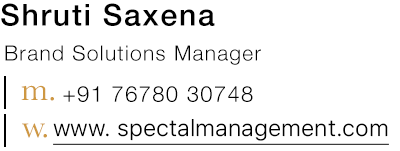
<style>
.page{position:relative;width:400px;height:151px;background:#ffffff}
.page>*{position:absolute;margin:0}
.t1{font:30px "HelveticaNeue-Medium";letter-spacing:0.06em;color:#000000}
.t2{font:21px "HelveticaNeue-Light";letter-spacing:0.06em;color:#000000}
.t3{font:22px "HelveticaNeue-Light";letter-spacing:0.06em;color:#000000}
</style>
<div class="page">
<p class="t1" style="left:1px;top:3px;width:214px;height:23px">Shruti Saxena</p>
<p class="t2" style="left:5px;top:45px;width:256px;height:20px">Brand Solutions Manager</p>
<p class="t3" style="left:63px;top:86px;width:190px;height:16px">+91 76780 30748</p>
</div>
